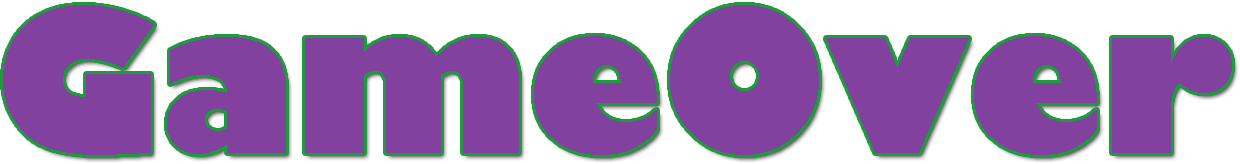
<style>
.page{position:relative;width:1240px;height:164px;background:#83419f}
.page>*{position:absolute;margin:0}
.t1{font:195.6px "GillSans-UltraBold";letter-spacing:-0.01em;color:#83419f}
</style>
<div class="page">
<p class="t1" style="left:3px;top:5px;width:1229px;height:150px">GameOver</p>
</div>
